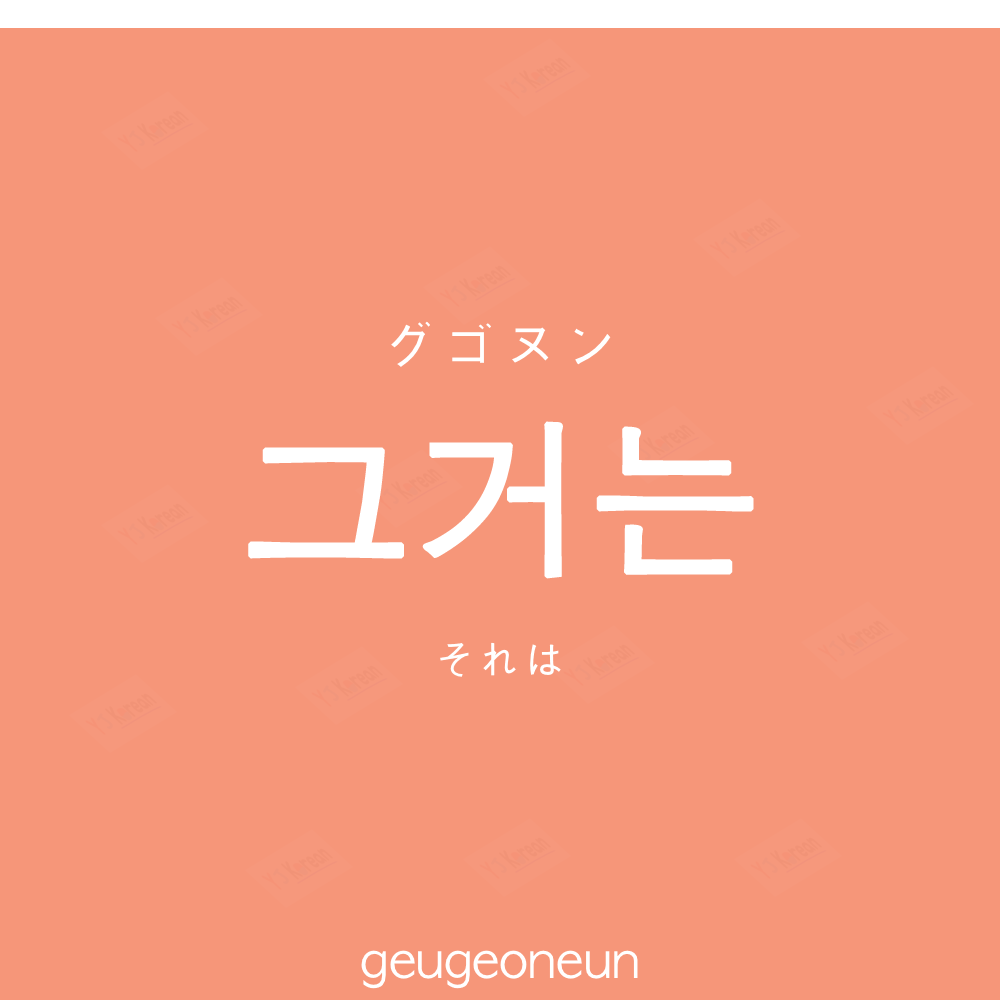
<style>
.page{position:relative;width:1000px;height:1000px;background:#f69679}
.page>*{position:absolute;margin:0}
.t1{font:60px "AppleGothic";color:#ffffff}
.t2{font:170px "AppleGothic";color:#ffffff;font-weight:bold}
.t3{font:45px "AppleGothic";color:#ffffff}
.t4{font:50px "AppleGothic";color:#ffffff}
</style>
<div class="page">
<p class="t1" style="left:391px;top:321px;width:220px;height:46px">グゴヌン</p>
<p class="t2" style="left:248px;top:421px;width:506px;height:158px">그거는</p>
<p class="t3" style="left:440px;top:642px;width:121px;height:35px">それは</p>
<p class="t4" style="left:361px;top:950px;width:277px;height:39px">geugeoneun</p>
</div>
